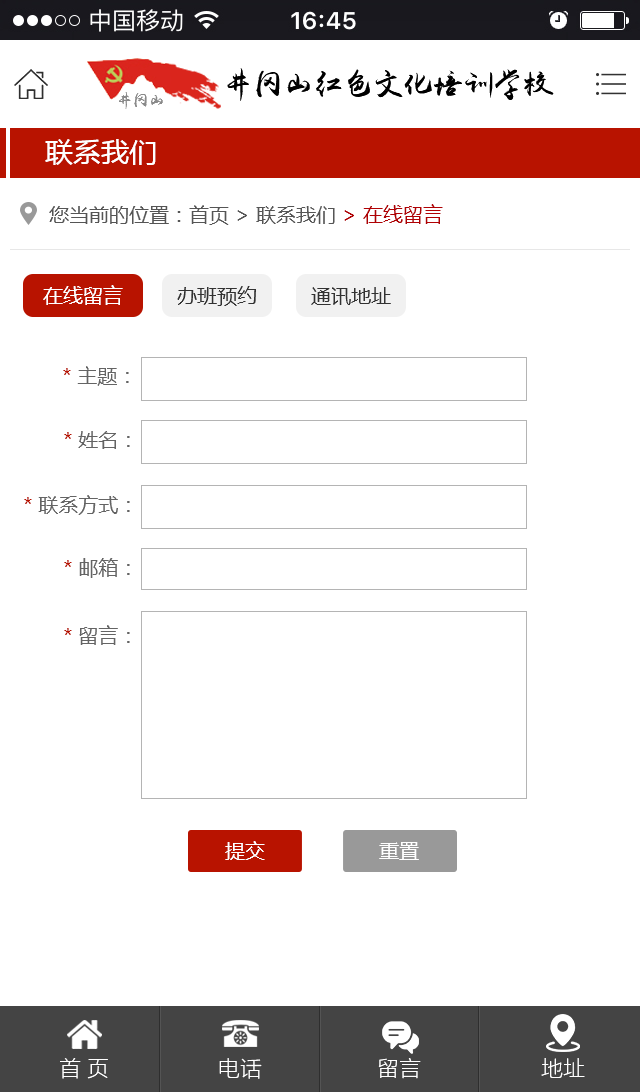
<style>
.page{position:relative;width:640px;height:1092px;background:#ffffff}
.page>*{position:absolute;margin:0}
.t1{font:28px "MicrosoftYaHei";color:#ffffff}
.t2{font:20px "MicrosoftYaHei";color:#555555}
.t3{font:20px "MicrosoftYaHei";color:#b00104}
.t4{font:20px "MicrosoftYaHei";color:#323232}
.t5{font:20px "MicrosoftYaHei";color:#ffffff}
.t6{font:20px "MicrosoftYaHei";color:#646464}
.t7{font:20px "MicrosoftYaHei";color:#b81300}
.t8{font:22px "FZLTKHK--GBK1-0";color:#ffffff}
</style>
<div class="page">
<p class="t1" style="left:45px;top:139px;width:111px;height:26px">联系我们</p>
<p class="t2" style="left:49px;top:204px;width:394px;height:21px">您当前的位置：首页 &gt; 联系我们<span class="t3"> &gt; 在线留言</span></p>
<p class="t4" style="left:43px;top:285px;width:348px;height:21px"><span class="t5">在线留言  </span>       办班预约         通讯地址</p>
<p class="t6" style="left:63px;top:366px;width:66px;height:20px"><span class="t7">* </span>主题：</p>
<p class="t6" style="left:64px;top:431px;width:66px;height:18px"><span class="t7">* </span>姓名：</p>
<p class="t6" style="left:24px;top:495px;width:106px;height:20px"><span class="t7">* </span>联系方式：</p>
<p class="t6" style="left:64px;top:558px;width:66px;height:20px"><span class="t7">* </span>邮箱：</p>
<p class="t6" style="left:64px;top:625px;width:66px;height:20px"><span class="t7">* </span>留言：</p>
<p class="t5" style="left:225px;top:841px;width:40px;height:19px">提交</p>
<p class="t5" style="left:379px;top:842px;width:40px;height:18px">重置</p>
<p class="t8" style="left:60px;top:1058px;width:48px;height:21px">首 页</p>
<p class="t8" style="left:219px;top:1058px;width:43px;height:21px">电话</p>
<p class="t8" style="left:378px;top:1058px;width:43px;height:21px">留言</p>
<p class="t8" style="left:541px;top:1058px;width:44px;height:20px">地址</p>
</div>
